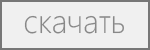
<style>
.page{position:relative;width:150px;height:50px;background:#f0f0f0}
.page>*{position:absolute;margin:0}
.t1{font:33.3px "SegoeUI-Light";color:#888888;scale:0.95 1}
</style>
<div class="page">
<p class="t1" style="left:24px;top:15px;width:100px;height:19px">скачать</p>
</div>
